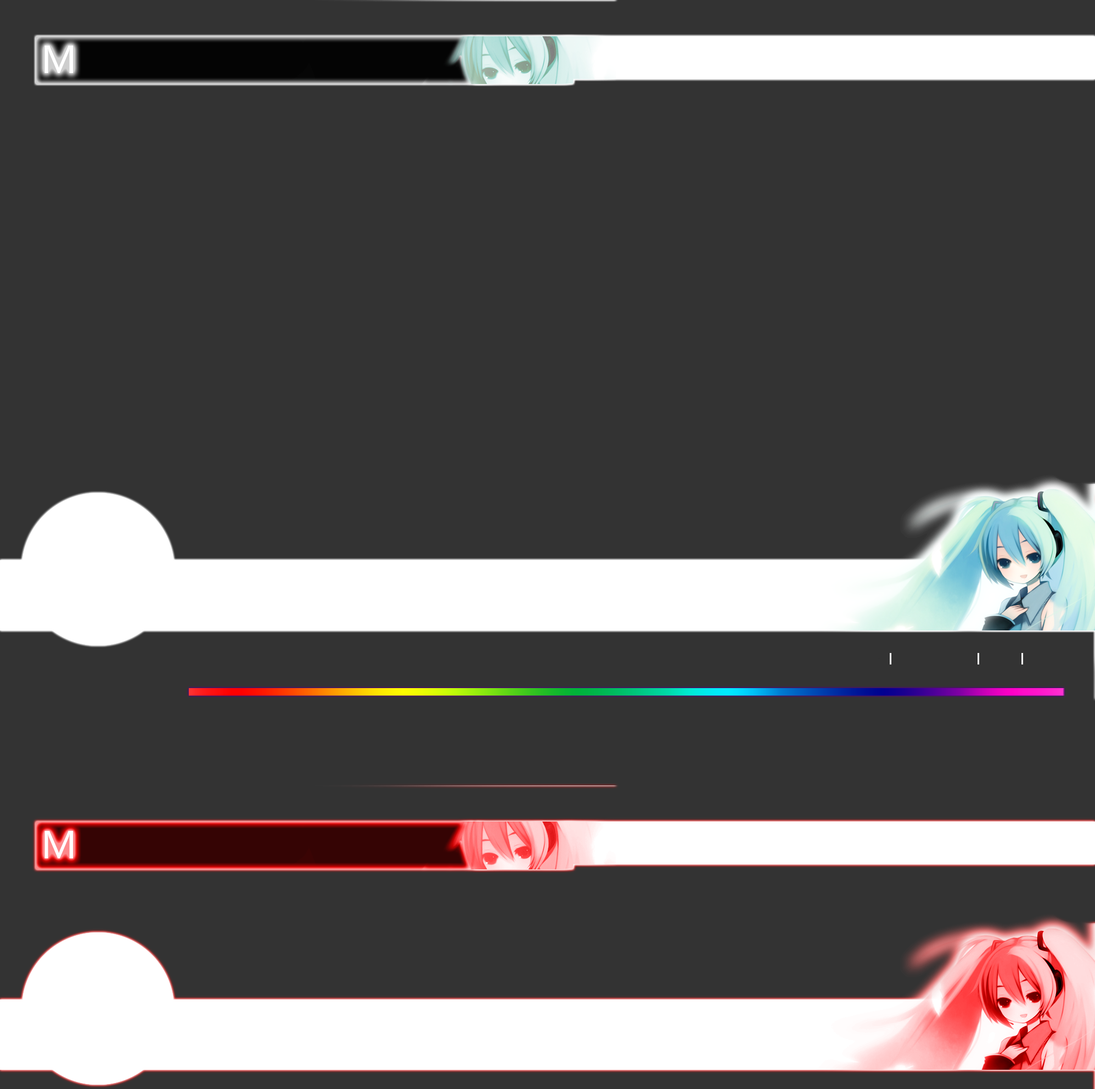
<style>
.page{position:relative;width:1095px;height:1089px;background:#333333}
.page>*{position:absolute;margin:0}
.t1{font:36.2px "MicrosoftYaHei";color:#ffffff}
</style>
<div class="page">
<p class="t1" style="left:44px;top:46px;width:29px;height:27px">M</p>
</div>
